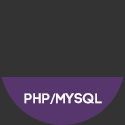
<style>
.page{position:relative;width:125px;height:125px;background:#333333}
.page>*{position:absolute;margin:0}
.t1{font:24px "Code-Pro-Demo";letter-spacing:0.01em;color:#f9f9f9;font-weight:bold}
.t2{font:24px "MyriadPro-Regular";letter-spacing:0.01em;color:#f9f9f9;font-weight:bold}
</style>
<div class="page">
<p class="t1" style="left:24px;top:93px;width:78px;height:11px">php<span class="t2">/</span>mysql</p>
</div>
